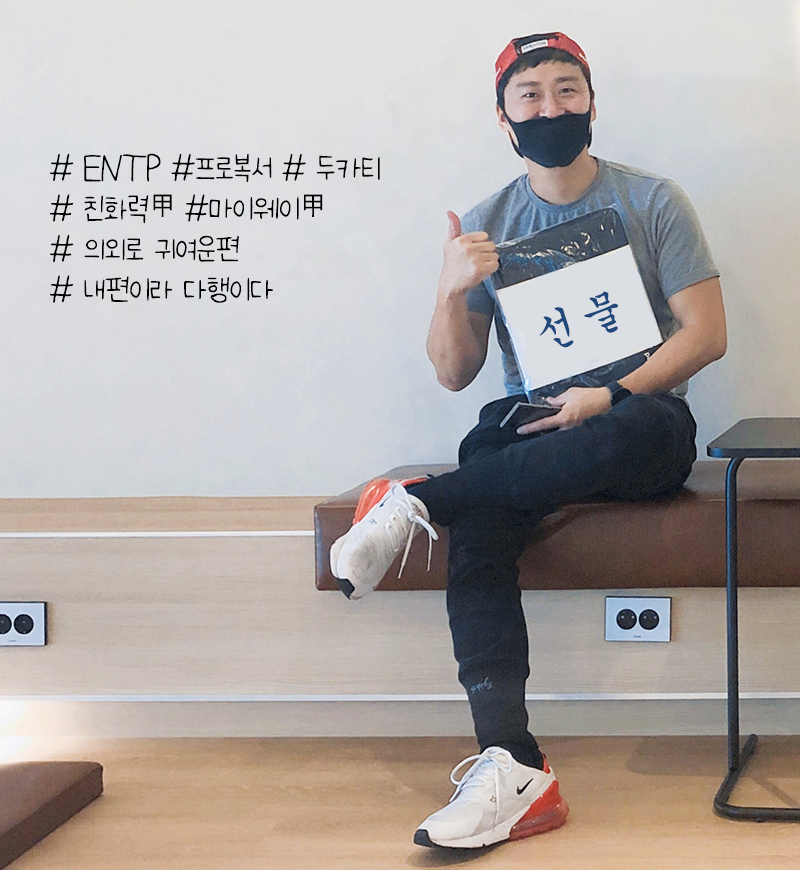
<style>
.page{position:relative;width:800px;height:870px}
.page>*{position:absolute;margin:0}
.t1{font:33.8px "NanumBaReunHiPi";color:#000000}
.t2{font:27px "AppleGothic";color:#000000}
.t3{font:48px "JCkg";color:#21487a}
</style>
<div class="page">
<p class="t1" style="left:50px;top:153px;width:330px;height:150px"># ENTP #프로복서 # 두카티<br># 친화력<span class="t2">甲 </span>#마이웨이<span class="t2">甲</span><br># 의외로 귀여운편<br># 내편이라 다행이다</p>
<p class="t3" style="left:539px;top:291px;width:79px;height:57px;rotate:-18deg">선물</p>
</div>
